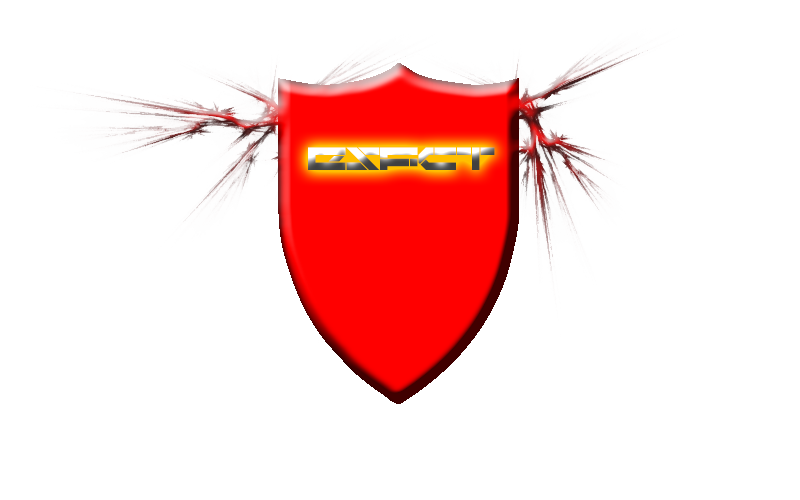
<style>
.page{position:relative;width:800px;height:500px;background:#ffffff}
.page>*{position:absolute;margin:0}
.t1{font:30px "Darktech-LDR"}
</style>
<div class="page">
<p class="t1" style="left:308px;top:147px;width:187px;height:23px">ESFCT</p>
</div>
